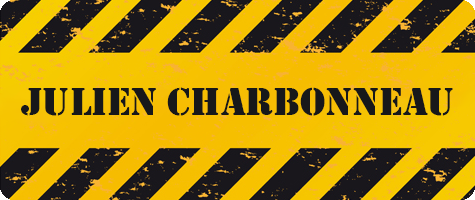
<style>
.page{position:relative;width:475px;height:200px}
.page>*{position:absolute;margin:0}
.t1{font:40px "Stencil";color:#17181a}
</style>
<div class="page">
<p class="t1" style="left:21px;top:87px;width:432px;height:29px">Julien Charbonneau</p>
</div>
